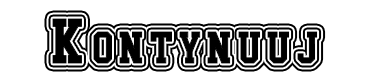
<style>
.page{position:relative;width:369px;height:82px;background:#ffffff}
.page>*{position:absolute;margin:0}
.t1{font:56px "CollegeBlock2.0";letter-spacing:0.15em;color:#000000;font-variant:small-caps}
</style>
<div class="page">
<p class="t1" style="left:52px;top:18px;width:266px;height:46px">Kontynuuj</p>
</div>
